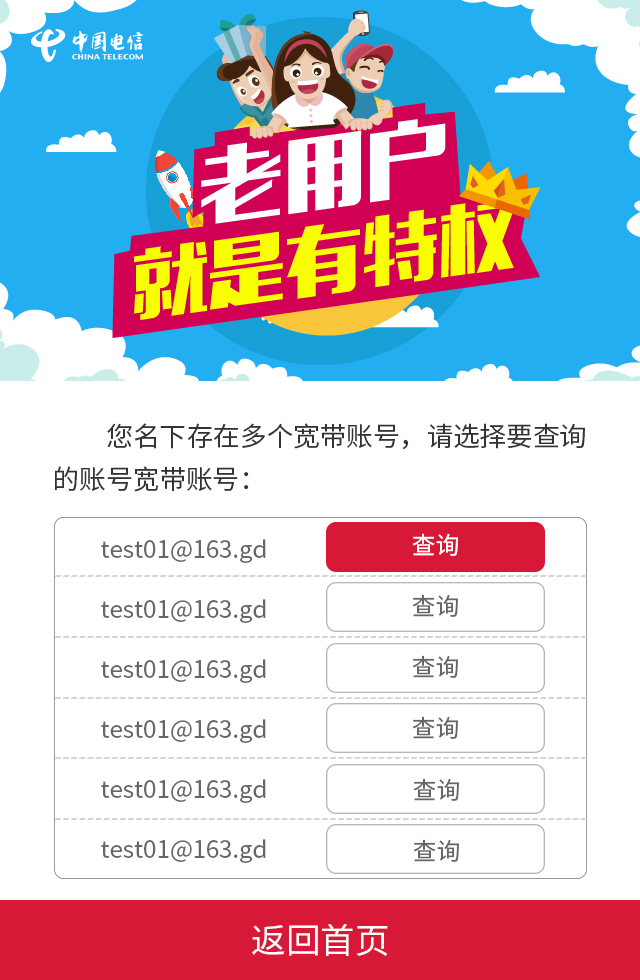
<style>
.page{position:relative;width:640px;height:980px;background:#ffffff}
.page>*{position:absolute;margin:0}
.t1{font:26.7px/42.7px "SourceHanSansCN-Regular";color:#333333}
.t2{font:24px "SourceHanSansCN-Regular";color:#fffefe}
.t3{font:24px/60px "SourceHanSansCN-Regular";color:#666666}
.t4{font:24px "SourceHanSansCN-Regular";color:#666666}
.t5{font:34.7px "SourceHanSansCN-Regular";color:#ffffff}
</style>
<div class="page">
<p class="t1" style="left:55px;top:423px;width:530px;height:69px">您名下存在多个宽带账号，请选择要查询<br>的账号宽带账号：</p>
<p class="t2" style="left:412px;top:533px;width:46px;height:23px">查询</p>
<p class="t3" style="left:101px;top:539px;width:165px;height:324px">test01@163.gd<br>test01@163.gd<br>test01@163.gd<br>test01@163.gd<br>test01@163.gd<br>test01@163.gd</p>
<p class="t4" style="left:412px;top:594px;width:46px;height:23px"><span class="t2"><br></span>查询</p>
<p class="t4" style="left:412px;top:655px;width:46px;height:23px"><span class="t2"><br></span>查询</p>
<p class="t4" style="left:412px;top:716px;width:46px;height:23px"><span class="t2"><br></span>查询</p>
<p class="t4" style="left:413px;top:778px;width:46px;height:23px"><span class="t2"><br></span>查询</p>
<p class="t4" style="left:413px;top:839px;width:46px;height:23px"><span class="t2"><br></span>查询</p>
<p class="t5" style="left:252px;top:924px;width:136px;height:32px">返回首页</p>
</div>
